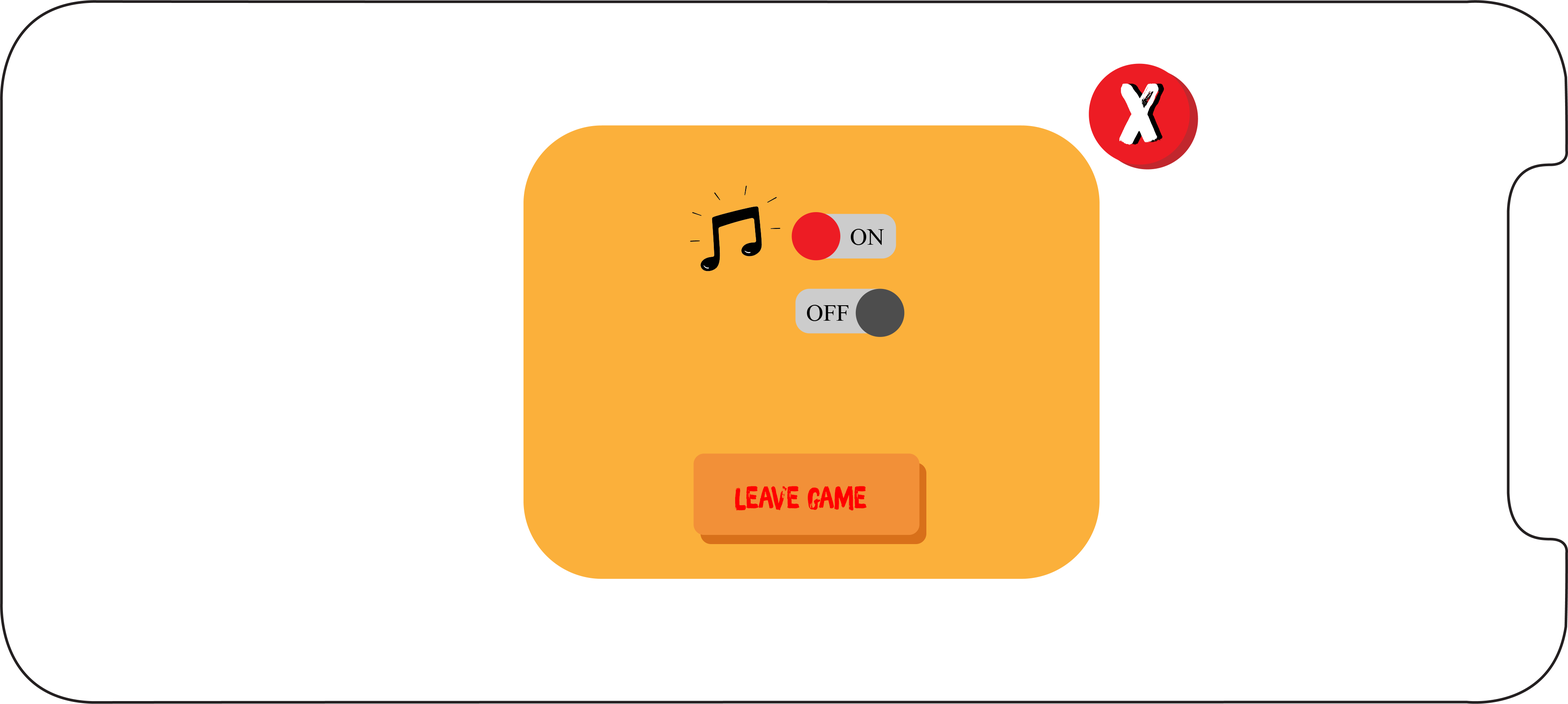
<style>
.page{position:relative;width:1568px;height:704px;background:#ffffff}
.page>*{position:absolute;margin:0}
.t1{font:82.3px "iCielBrushUp";color:#ffffff}
.t2{font:82.3px "iCielBrushUp"}
.t3{font:23.5px "MyriadPro-Regular";color:#000000}
.t4{font:30.8px "iCielBrushUp";color:#ff0000;scale:0.92 1}
</style>
<div class="page">
<p class="t1" style="left:1119px;top:83px;width:39px;height:62px">x</p>
<p class="t2" style="left:1125px;top:83px;width:39px;height:62px">x</p>
<p class="t3" style="left:851px;top:229px;width:33px;height:16px">ON</p>
<p class="t3" style="left:807px;top:305px;width:42px;height:16px">OFF</p>
<p class="t4" style="left:735px;top:486px;width:132px;height:25px">leave game</p>
</div>
